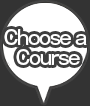
<style>
.page{position:relative;width:90px;height:106px;background:#ffffff}
.page>*{position:absolute;margin:0}
.t1{font:19px/20px "GothicMB101Pro-Medium";letter-spacing:-0.08em;color:#ffffff;scale:0.95 1}
</style>
<div class="page">
<p class="t1" style="left:4px;top:29px;width:83px;height:36px;text-align:center">Choose a<br> Course</p>
</div>
